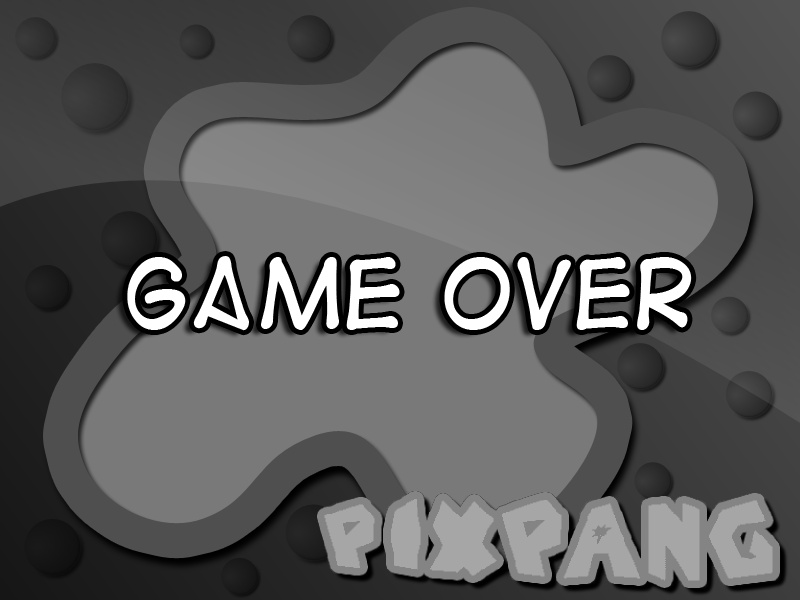
<style>
.page{position:relative;width:800px;height:600px}
.page>*{position:absolute;margin:0}
.t1{font:90px "DigitalStrip2";color:#ffffff}
</style>
<div class="page">
<p class="t1" style="left:127px;top:256px;width:565px;height:75px">game over</p>
</div>
